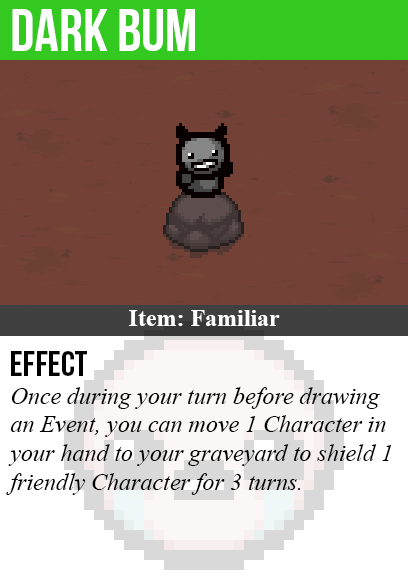
<style>
.page{position:relative;width:408px;height:585px;background:#734136}
.page>*{position:absolute;margin:0}
.t1{font:60px "BebasNeue";color:#ffffff}
.t2{font:24px "TimesNewRomanPS-BoldMT";color:#ffffff}
.t3{font:36px "BebasNeue";color:#000000}
.t4{font:24px "TimesNewRomanPS-ItalicMT";color:#000000}
</style>
<div class="page">
<p class="t1" style="left:12px;top:9px;width:183px;height:42px">dark bum</p>
<p class="t2" style="left:129px;top:310px;width:151px;height:16px">Item: Familiar</p>
<p class="t3" style="left:11px;top:351px;width:76px;height:25px">Effect</p>
<p class="t4" style="left:6px;top:387px;width:386px;height:108px">Once during your turn before drawing<br>an Event, you can move 1 Character in<br>your hand to your graveyard to shield 1<br>friendly Character for 3 turns.</p>
</div>
